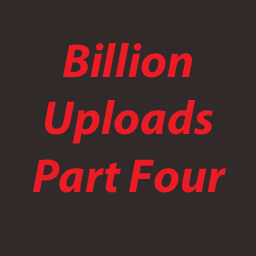
<style>
.page{position:relative;width:256px;height:256px;background:#312a2a}
.page>*{position:absolute;margin:0}
.t1{font:48px "MyriadPro-BoldIt";color:#ed1c24}
</style>
<div class="page">
<p class="t1" style="left:33px;top:43px;width:193px;height:150px;text-align:center">Billion <br>Uploads<br>Part Four</p>
</div>
